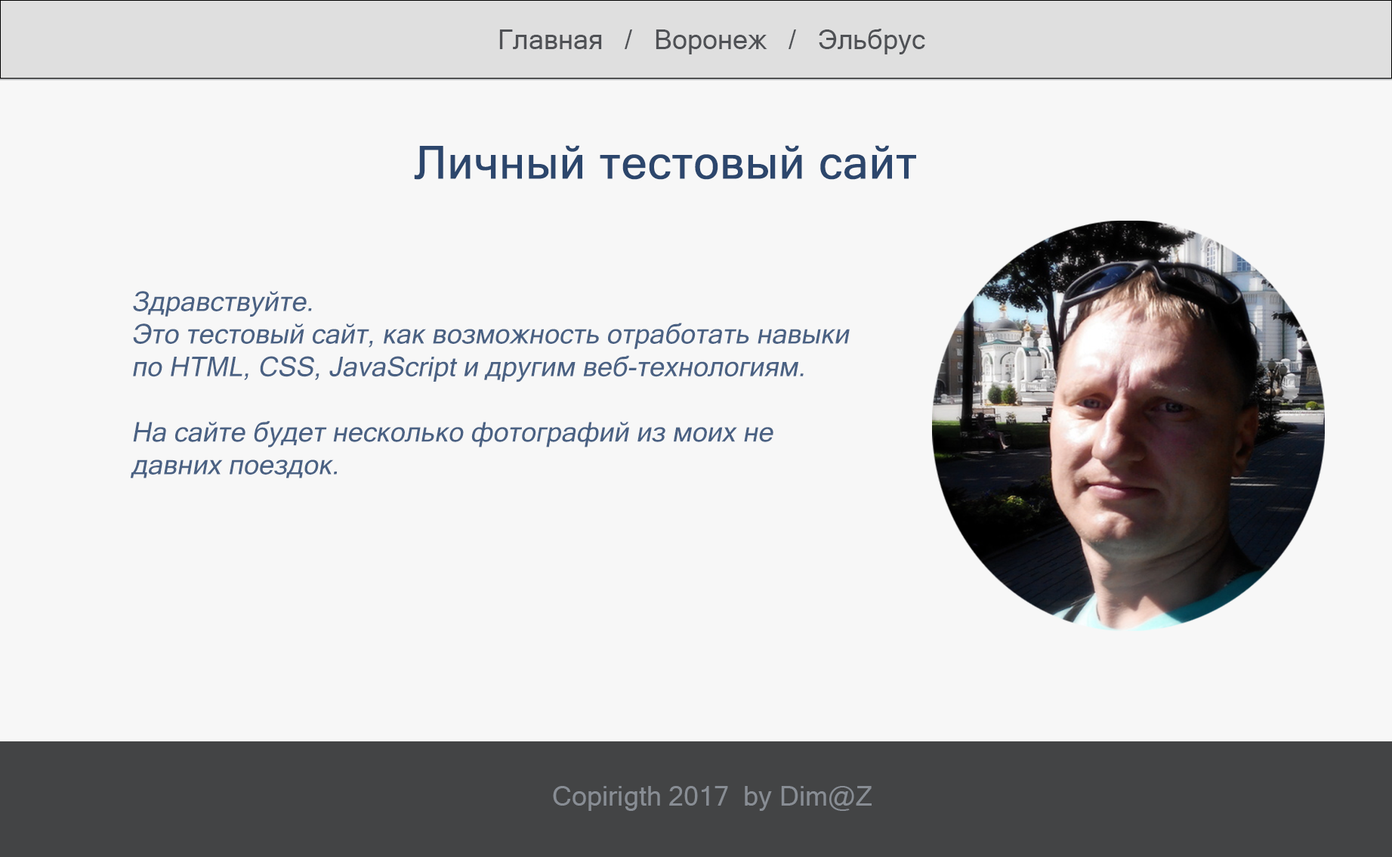
<style>
.page{position:relative;width:1392px;height:857px;background:#f7f7f7}
.page>*{position:absolute;margin:0}
.t1{font:27.2px "MicrosoftSansSerif";color:#4f5155}
.t2{font:45.3px "MicrosoftSansSerif";color:#2c466c;font-weight:bold}
.t3{font:27.2px "MicrosoftSansSerif";color:#4a6183;font-style:italic}
.t4{font:27.2px "MicrosoftSansSerif";color:#888d94}
</style>
<div class="page">
<p class="t1" style="left:499px;top:29px;width:426px;height:25px">Главная   /   Воронеж   /   Эльбрус</p>
<p class="t2" style="left:414px;top:145px;width:502px;height:35px">Личный тестовый сайт</p>
<p class="t3" style="left:131px;top:291px;width:719px;height:187px">Здравствуйте.<br>Это тестовый сайт, как возможность отработать навыки<br>по HTML, CSS, JavaScript и другим веб-технологиям.<br><br>На сайте будет несколько фотографий из моих не<br>давних поездок.</p>
<p class="t4" style="left:553px;top:786px;width:319px;height:24px">Copirigth 2017  by Dim@Z</p>
</div>
